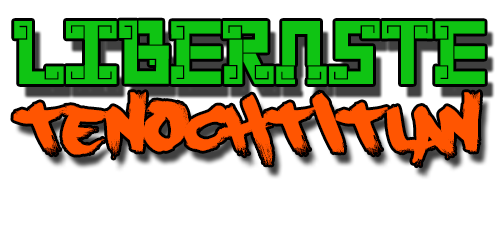
<style>
.page{position:relative;width:500px;height:235px;background:#ffffff}
.page>*{position:absolute;margin:0}
.t1{font:60px "New-Wave-Aztec-Regular";color:#0fc413}
.t2{font:53.9px "PaintCans";color:#ff5501}
</style>
<div class="page">
<p class="t1" style="left:14px;top:20px;width:471px;height:64px">LIBERASTE</p>
<p class="t2" style="left:13px;top:92px;width:468px;height:74px">TENOCHTITLAN</p>
</div>
